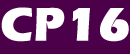
<style>
.page{position:relative;width:130px;height:54px;background:#4b0049}
.page>*{position:absolute;margin:0}
.t1{font:48px "ErasITC-Bold";color:#ffffff;font-weight:bold}
</style>
<div class="page">
<p class="t1" style="left:1px;top:7px;width:128px;height:35px">CP16</p>
</div>
